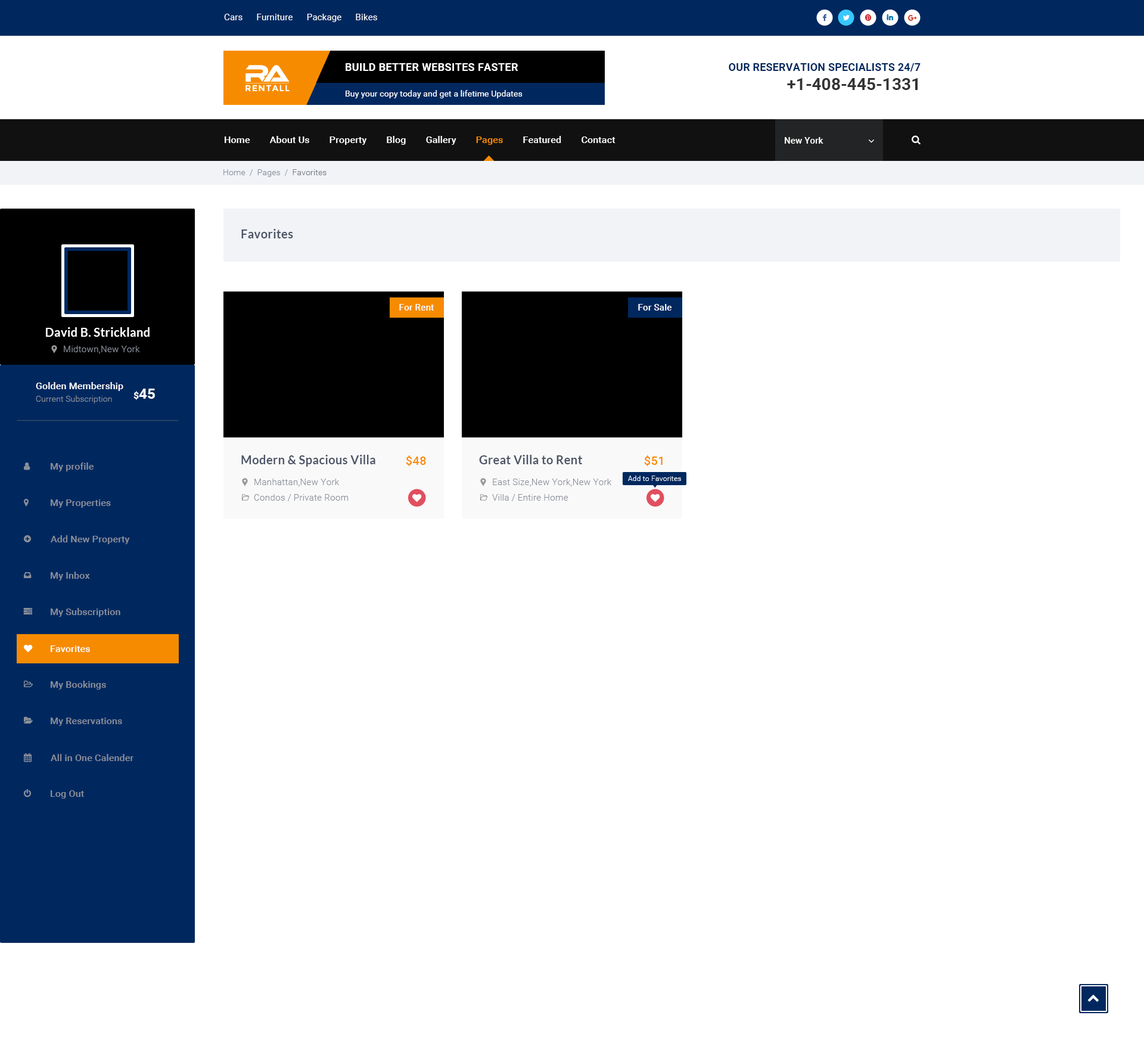
<style>
.page{position:relative;width:1144px;height:1043px;background:#ffffff}
.page>*{position:absolute;margin:0}
.t1{font:8.9px "Roboto-Regular";letter-spacing:0.01em;color:#ffffff}
.t2{font:10.7px "Roboto-Bold";letter-spacing:0.02em;color:#ffffff;text-transform:uppercase}
.t3{font:10.7px "Roboto-Bold";letter-spacing:0.01em;color:#00285f;text-transform:uppercase}
.t4{font:8.7px "Montserrat-Bold";letter-spacing:0.08em;color:#ffffff;text-transform:uppercase}
.t5{font:8.3px "Roboto-Regular";letter-spacing:0.01em;color:#ffffff}
.t6{font:16.7px "Roboto-Bold";color:#333333}
.t7{font:9.5px "Roboto-Medium";letter-spacing:0.01em;color:#ffffff}
.t8{font:9.5px "Roboto-Medium";letter-spacing:0.01em;color:#f78b00}
.t9{font:8.9px "Roboto-Medium";letter-spacing:0.01em;color:#ffffff}
.t10{font:8.3px "Roboto-Light";letter-spacing:0.01em;color:#8a8f9a}
.t11{font:8.3px "Roboto-Light";letter-spacing:0.01em;color:#757983}
.t12{font:11.9px "Lato-Bold";letter-spacing:0.01em;color:#4d5567}
.t13{font:11.9px "Lato-Bold";letter-spacing:0.01em;color:#ffffff}
.t14{font:8.9px "Roboto-Light";letter-spacing:0.01em;color:#8a8f9a}
.t15{font:14.3px "Roboto-Bold";letter-spacing:0.01em;color:#ffffff}
.t16{font:9.5px "Roboto-Bold";letter-spacing:0.01em;color:#ffffff}
.t17{font:11.9px "Roboto-Medium";letter-spacing:0.01em;color:#f78b00}
.t18{font:9.5px "Roboto-Medium";letter-spacing:0.01em;color:#8a8f9a}
.t19{font:7.1px "Roboto-Light";letter-spacing:0.01em;color:#ffffff}
</style>
<div class="page">
<p class="t1" style="left:224px;top:14px;width:153px;height:8px">Cars      Furniture      Package      Bikes</p>
<p class="t2" style="left:346px;top:63px;width:172px;height:8px">Build better Websites Faster</p>
<p class="t3" style="left:729px;top:63px;width:191px;height:8px">Our Reservation Specialists 24/7</p>
<p class="t4" style="left:245px;top:85px;width:45px;height:6px">RentAll</p>
<p class="t5" style="left:346px;top:90px;width:176px;height:8px">Buy your copy today and get a lifetime Updates</p>
<p class="t6" style="left:787px;top:78px;width:130px;height:12px">+1-408-445-1331</p>
<p class="t7" style="left:225px;top:136px;width:390px;height:9px">Home        About Us        Property        Blog        Gallery        <span class="t8">Pages</span>        Featured        Contact</p>
<p class="t9" style="left:785px;top:137px;width:38px;height:7px">New York</p>
<p class="t10" style="left:223px;top:169px;width:103px;height:8px">Home  /  Pages  /  <span class="t11">Favorites</span></p>
<p class="t12" style="left:241px;top:229px;width:52px;height:9px">Favorites</p>
<p class="t9" style="left:399px;top:304px;width:35px;height:6px">For Rent</p>
<p class="t9" style="left:638px;top:304px;width:33px;height:6px">For Sale</p>
<p class="t13" style="left:46px;top:327px;width:104px;height:10px">David B. Strickland</p>
<p class="t14" style="left:64px;top:346px;width:76px;height:8px">Midtown,New York</p>
<p class="t7" style="left:36px;top:382px;width:87px;height:9px">Golden Membership</p>
<p class="t15" style="left:133px;top:388px;width:22px;height:12px"><span class="t16">$</span>45</p>
<p class="t10" style="left:36px;top:395px;width:76px;height:8px">Current Subscription</p>
<p class="t12" style="left:241px;top:455px;width:134px;height:11px">Modern &amp; Spacious Villa</p>
<p class="t17" style="left:406px;top:455px;width:20px;height:11px">$48</p>
<p class="t12" style="left:479px;top:455px;width:103px;height:9px">Great Villa to Rent</p>
<p class="t17" style="left:644px;top:455px;width:18px;height:11px">$51</p>
<p class="t18" style="left:51px;top:462px;width:43px;height:9px">My profile</p>
<p class="t14" style="left:254px;top:478px;width:86px;height:9px">Manhattan,New York</p>
<p class="t14" style="left:493px;top:478px;width:119px;height:9px">East Size,New York,New York</p>
<p class="t19" style="left:628px;top:475px;width:53px;height:6px">Add to Favorites</p>
<p class="t14" style="left:254px;top:494px;width:95px;height:7px">Condos / Private Room</p>
<p class="t14" style="left:492px;top:494px;width:76px;height:7px">Villa / Entire Home</p>
<p class="t18" style="left:51px;top:499px;width:60px;height:9px">My Properties</p>
<p class="t18" style="left:51px;top:535px;width:79px;height:9px">Add New Property</p>
<p class="t18" style="left:51px;top:571px;width:39px;height:9px">My Inbox</p>
<p class="t18" style="left:51px;top:608px;width:69px;height:9px">My Subscription</p>
<p class="t7" style="left:51px;top:645px;width:39px;height:7px">Favorites</p>
<p class="t18" style="left:51px;top:680px;width:55px;height:9px">My Bookings</p>
<p class="t18" style="left:51px;top:717px;width:71px;height:9px">My Reservations</p>
<p class="t18" style="left:51px;top:754px;width:82px;height:7px">All in One Calender</p>
<p class="t18" style="left:51px;top:790px;width:33px;height:8px">Log Out</p>
</div>
